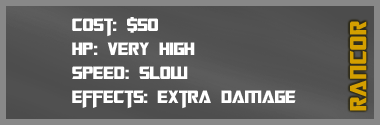
<style>
.page{position:relative;width:380px;height:125px}
.page>*{position:absolute;margin:0}
.t1{font:20px "TransformersMovie";color:#ffffff}
.t2{font:20px "TransformersMovie";letter-spacing:0.04em;color:#ffffff}
.t3{font:26px "TransformersMovie";letter-spacing:0.04em;color:#d49f00}
</style>
<div class="page">
<p class="t1" style="left:72px;top:17px;width:224px;height:92px">Cost: $50<br>h<span class="t2">p</span>: very high<br>Spee<span class="t2">d</span>: slow<br>effects: extra damage</p>
<p class="t3" style="left:350px;top:21px;width:17px;height:90px;rotate:-90deg">rancor</p>
</div>
